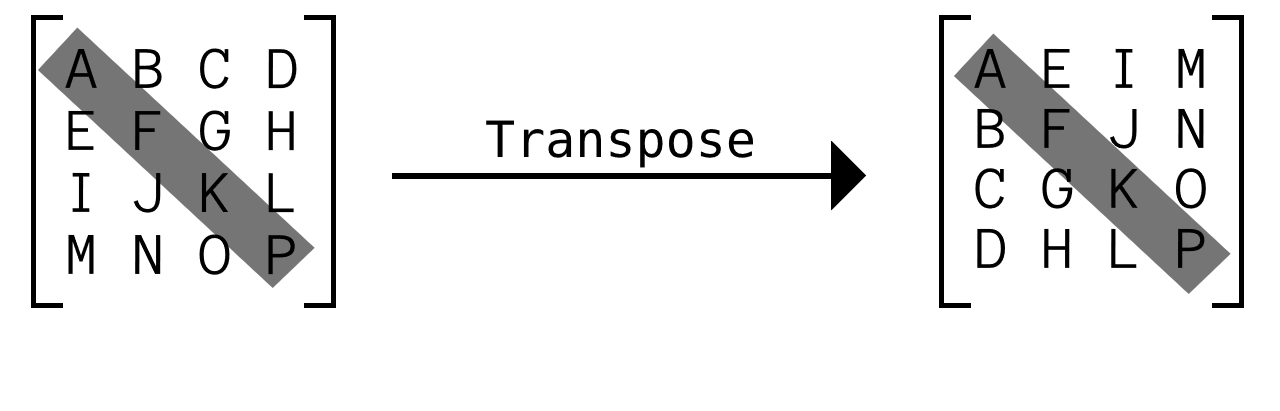
<style>
.page{position:relative;width:1280px;height:411px;background:#ffffff}
.page>*{position:absolute;margin:0}
.t1{font:50px "Anonymous";color:#000000}
.t2{font:50px "BitstreamVeraSansMono-Roman";color:#000000}
</style>
<div class="page">
<p class="t1" style="left:65px;top:48px;width:232px;height:41px">A B C D</p>
<p class="t1" style="left:974px;top:48px;width:32px;height:220px">A<br>B<br>C<br>D</p>
<p class="t1" style="left:1042px;top:48px;width:31px;height:220px">E<br>F<br>G<br>H</p>
<p class="t1" style="left:1109px;top:48px;width:29px;height:220px">I<br>J<br>K<br>L</p>
<p class="t1" style="left:1175px;top:48px;width:31px;height:220px">M<br>N<br>O<br>P</p>
<p class="t1" style="left:68px;top:110px;width:226px;height:41px">E F G H</p>
<p class="t2" style="left:486px;top:120px;width:267px;height:48px">Transpose</p>
<p class="t1" style="left:72px;top:172px;width:222px;height:41px">I J K L</p>
<p class="t1" style="left:68px;top:234px;width:227px;height:41px">M N O P</p>
</div>
